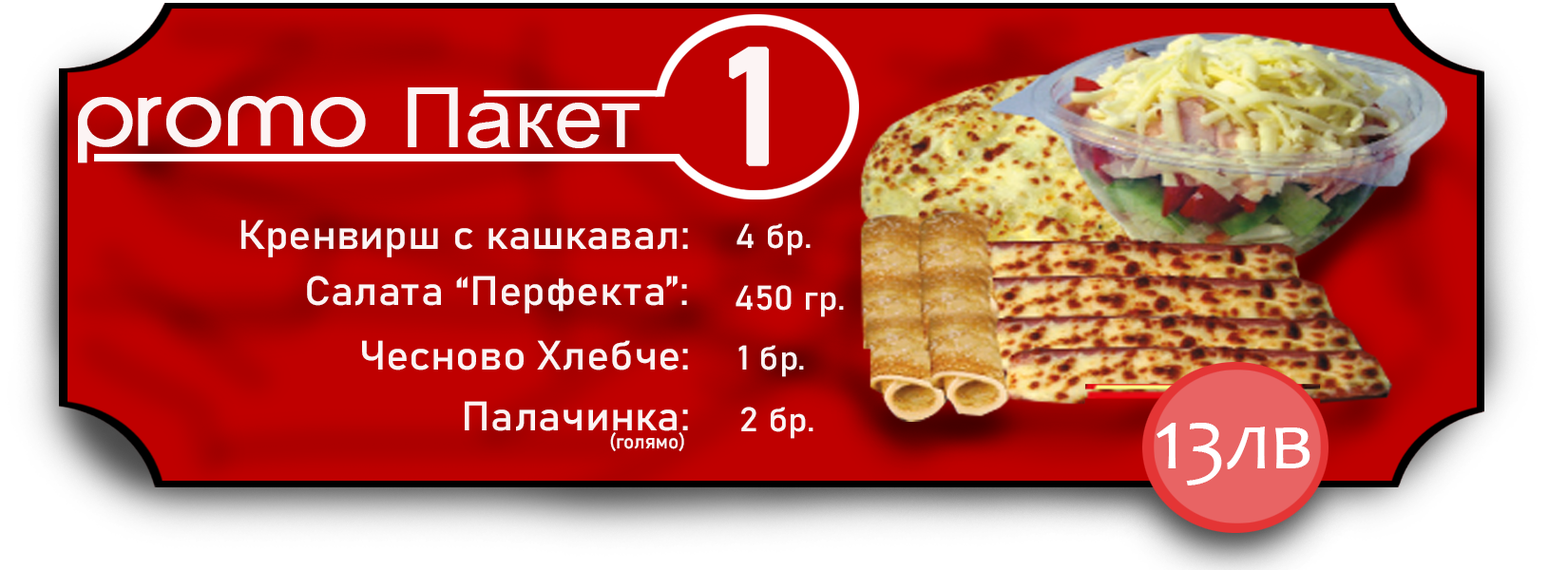
<style>
.page{position:relative;width:1568px;height:570px}
.page>*{position:absolute;margin:0}
.t1{font:160.4px "Bahnschrift";color:#fcf4f4;font-weight:bold;scale:1.07 1}
.t2{font:83px "ArialMT";color:#fcf4f4;scale:1.07 1}
.t3{font:83px "AbeatbyKai";color:#fcf4f4;font-weight:bold;scale:1.07 1}
.t4{font:40.4px "Bahnschrift";color:#fcf4f4;scale:1.07 1}
.t5{font:33.7px "Bahnschrift";color:#fcf4f4;scale:1.07 1}
.t6{font:87.1px "Candara";color:#ffffff}
.t7{font:19.8px "Bahnschrift";color:#fcf4f4}
</style>
<div class="page">
<p class="t1" style="left:729px;top:47px;width:40px;height:119px">1</p>
<p class="t2" style="left:408px;top:87px;width:232px;height:61px">Пакет</p>
<p class="t3" style="left:78px;top:96px;width:288px;height:67px">promo</p>
<p class="t4" style="left:241px;top:220px;width:447px;height:38px">Кренвирш с кашкавал:</p>
<p class="t5" style="left:736px;top:223px;width:75px;height:33px">4 бр.</p>
<p class="t4" style="left:307px;top:276px;width:380px;height:38px">Салата “Перфекта”:</p>
<p class="t5" style="left:736px;top:285px;width:108px;height:32px">450 гр.</p>
<p class="t4" style="left:362px;top:340px;width:326px;height:31px">Чесново Хлебче:</p>
<p class="t5" style="left:738px;top:345px;width:66px;height:32px">1 бр.</p>
<p class="t4" style="left:465px;top:401px;width:223px;height:30px">Палачинка:</p>
<p class="t5" style="left:741px;top:407px;width:72px;height:32px">2 бр.</p>
<p class="t6" style="left:1157px;top:423px;width:153px;height:63px">13лв</p>
<p class="t7" style="left:610px;top:432px;width:74px;height:19px">(голямо)</p>
</div>
